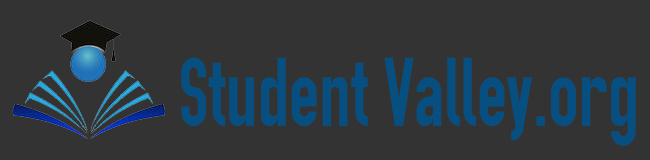
<style>
.page{position:relative;width:650px;height:160px;background:#333333}
.page>*{position:absolute;margin:0}
.t1{font:97.5px "OSP-DIN";color:#084f81;scale:0.85 1}
</style>
<div class="page">
<p class="t1" style="left:181px;top:57px;width:351px;height:84px">Student Valley</p>
<p class="t1" style="left:536px;top:77px;width:100px;height:69px">.org</p>
</div>
